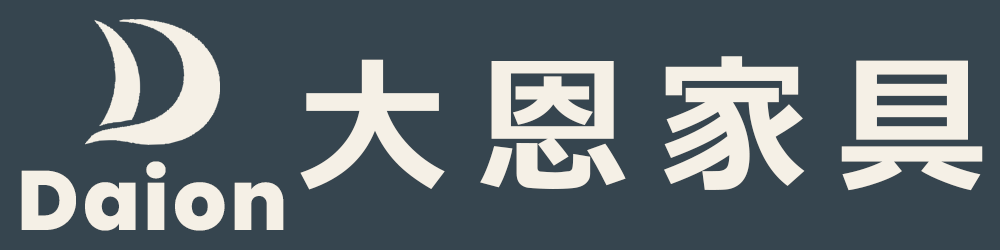
<style>
.page{position:relative;width:1000px;height:250px;background:#36454f}
.page>*{position:absolute;margin:0}
.t1{font:150px "MeiryoUI-BoldItalic";letter-spacing:0.2em;color:#f5f0e6}
.t2{font:84.2px "Poppins-ExtraBold";letter-spacing:0.05em;color:#f5f0e6}
</style>
<div class="page">
<p class="t1" style="left:300px;top:56px;width:683px;height:135px">大恩家具</p>
<p class="t2" style="left:21px;top:161px;width:263px;height:70px">Daion</p>
</div>
